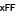
<style>
.page{position:relative;width:16px;height:16px;background:#ffffff}
.page>*{position:absolute;margin:0}
.t1{font:10px "TrebuchetMS";color:#000000}
</style>
<div class="page">
<p class="t1" style="left:0px;top:4px;width:16px;height:7px">xFF</p>
</div>
